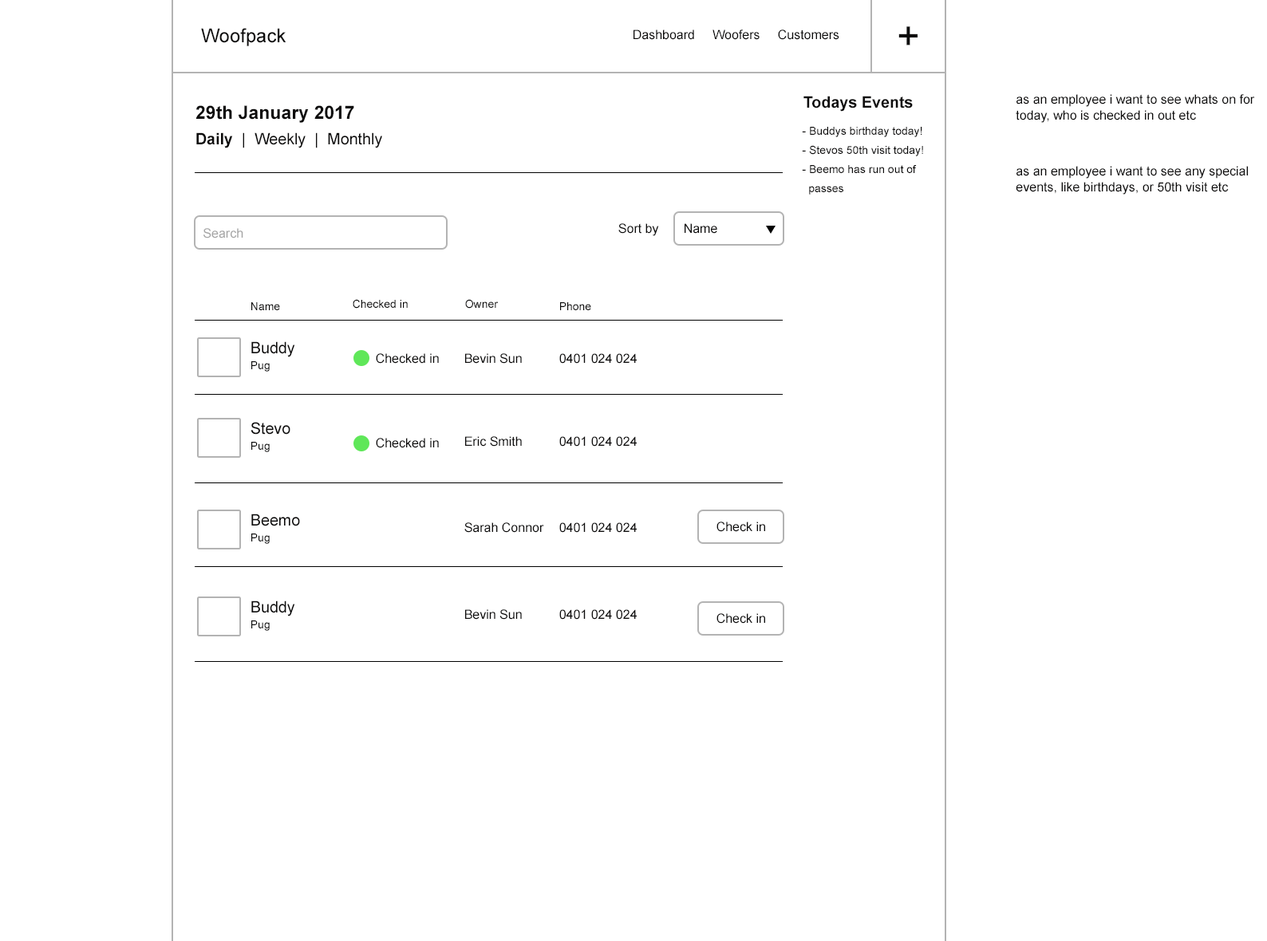
<style>
.page{position:relative;width:1267px;height:941px;background:#ffffff}
.page>*{position:absolute;margin:0}
.t1{font:19.1px "ArialMT";color:#0c0b0b}
.t2{font:12.8px "ArialMT";color:#0c0b0b}
.t3{font:39px "ArialMT";color:#0c0b0b}
.t4{font:15.7px "Arial-BoldMT";color:#0c0b0b}
.t5{font:12.8px/16px "ArialMT";color:#0c0b0b}
.t6{font:18.4px "Arial-BoldMT";color:#0c0b0b}
.t7{font:15.7px "ArialMT";color:#0c0b0b}
.t8{font:11.2px/19.1px "ArialMT";color:#0c0b0b}
.t9{font:12.8px "ArialMT";color:#a5a5a5}
.t10{font:11.2px "ArialMT";color:#0c0b0b}
</style>
<div class="page">
<p class="t1" style="left:201px;top:28px;width:85px;height:18px">Woofpack</p>
<p class="t2" style="left:633px;top:30px;width:206px;height:10px">Dashboard     Woofers     Customers</p>
<p class="t3" style="left:898px;top:26px;width:19px;height:19px">+</p>
<p class="t4" style="left:803px;top:96px;width:110px;height:16px">Todays Events</p>
<p class="t5" style="left:1015px;top:94px;width:240px;height:29px">as an employee i want to see whats on for today, who is checked in out etc</p>
<p class="t6" style="left:195px;top:105px;width:159px;height:18px">29th January 2017</p>
<p class="t7" style="left:196px;top:132px;width:186px;height:16px"><span class="t4">Daily </span> |  Weekly  |  Monthly</p>
<p class="t8" style="left:802px;top:127px;width:121px;height:68px">- Buddys birthday today!<br>- Stevos 50th visit today!<br>- Beemo has run out of<br>  passes</p>
<p class="t5" style="left:1015px;top:166px;width:233px;height:29px">as an employee i want to see any special events, like birthdays, or 50th visit etc</p>
<p class="t9" style="left:203px;top:228px;width:40px;height:11px">Search</p>
<p class="t2" style="left:618px;top:223px;width:41px;height:13px">Sort by</p>
<p class="t2" style="left:684px;top:223px;width:33px;height:11px">Name</p>
<p class="t10" style="left:251px;top:302px;width:29px;height:8px">Name</p>
<p class="t10" style="left:353px;top:299px;width:55px;height:10px">Checked in</p>
<p class="t10" style="left:465px;top:299px;width:34px;height:10px">Owner</p>
<p class="t10" style="left:560px;top:302px;width:31px;height:8px">Phone</p>
<p class="t7" style="left:251px;top:341px;width:44px;height:16px">Buddy</p>
<p class="t2" style="left:376px;top:353px;width:63px;height:11px">Checked in</p>
<p class="t2" style="left:465px;top:353px;width:57px;height:11px">Bevin Sun</p>
<p class="t2" style="left:559px;top:353px;width:78px;height:11px">0401 024 024</p>
<p class="t10" style="left:251px;top:361px;width:19px;height:11px">Pug</p>
<p class="t7" style="left:250px;top:422px;width:40px;height:13px">Stevo</p>
<p class="t2" style="left:376px;top:438px;width:63px;height:10px">Checked in</p>
<p class="t2" style="left:465px;top:436px;width:57px;height:11px">Eric Smith</p>
<p class="t2" style="left:559px;top:436px;width:78px;height:11px">0401 024 024</p>
<p class="t10" style="left:251px;top:442px;width:19px;height:10px">Pug</p>
<p class="t7" style="left:251px;top:514px;width:49px;height:12px">Beemo</p>
<p class="t2" style="left:716px;top:522px;width:49px;height:10px">Check in</p>
<p class="t10" style="left:251px;top:534px;width:19px;height:10px">Pug</p>
<p class="t2" style="left:464px;top:523px;width:80px;height:10px">Sarah Connor</p>
<p class="t2" style="left:559px;top:523px;width:78px;height:10px">0401 024 024</p>
<p class="t7" style="left:251px;top:601px;width:44px;height:16px">Buddy</p>
<p class="t2" style="left:465px;top:609px;width:57px;height:11px">Bevin Sun</p>
<p class="t2" style="left:559px;top:609px;width:78px;height:11px">0401 024 024</p>
<p class="t2" style="left:716px;top:613px;width:49px;height:11px">Check in</p>
<p class="t10" style="left:251px;top:621px;width:19px;height:10px">Pug</p>
</div>
